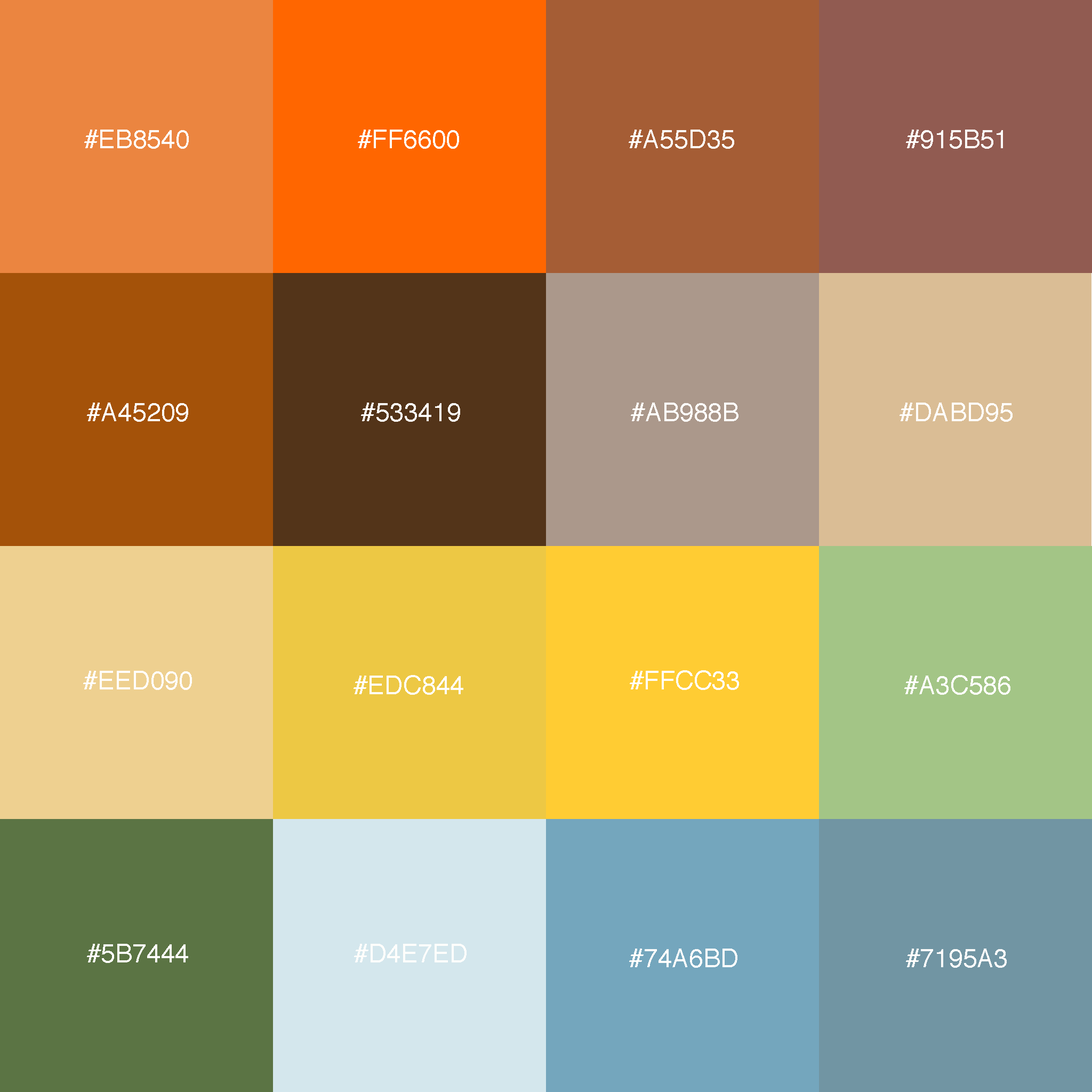
<style>
.page{position:relative;width:1092px;height:1092px}
.page>*{position:absolute;margin:0}
.t1{font:25.6px "Helvetica";color:#fffefc}
</style>
<div class="page">
<p class="t1" style="left:84px;top:130px;width:105px;height:19px">#EB8540</p>
<p class="t1" style="left:358px;top:130px;width:101px;height:19px">#FF6600</p>
<p class="t1" style="left:629px;top:130px;width:105px;height:19px">#A55D35</p>
<p class="t1" style="left:906px;top:130px;width:97px;height:19px">#915B51</p>
<p class="t1" style="left:87px;top:403px;width:101px;height:19px">#A45209</p>
<p class="t1" style="left:361px;top:403px;width:99px;height:19px">#533419</p>
<p class="t1" style="left:631px;top:403px;width:107px;height:19px">#AB988B</p>
<p class="t1" style="left:900px;top:403px;width:113px;height:19px">#DABD95</p>
<p class="t1" style="left:83px;top:671px;width:109px;height:19px">#EED090</p>
<p class="t1" style="left:354px;top:675px;width:109px;height:20px">#EDC844</p>
<p class="t1" style="left:630px;top:670px;width:109px;height:20px">#FFCC33</p>
<p class="t1" style="left:904px;top:675px;width:106px;height:20px">#A3C586</p>
<p class="t1" style="left:87px;top:944px;width:101px;height:19px">#5B7444</p>
<p class="t1" style="left:354px;top:944px;width:113px;height:18px">#D4E7ED</p>
<p class="t1" style="left:629px;top:949px;width:108px;height:19px">#74A6BD</p>
<p class="t1" style="left:906px;top:949px;width:101px;height:19px">#7195A3</p>
</div>
